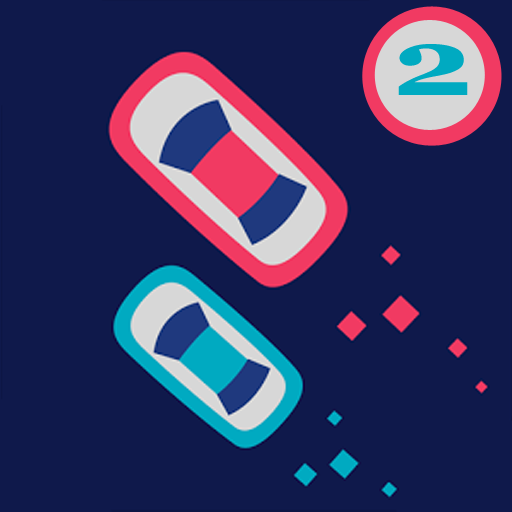
<style>
.page{position:relative;width:512px;height:512px;background:#0f194b}
.page>*{position:absolute;margin:0}
.t1{font:94.1px "Vani-Bold";color:#00aac1;scale:1.37 1}
</style>
<div class="page">
<p class="t1" style="left:398px;top:44px;width:70px;height:51px">2</p>
</div>
